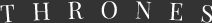
<style>
.page{position:relative;width:212px;height:23px;background:#333333}
.page>*{position:absolute;margin:0}
.t1{font:24px "PlayfairDisplay-Regular";letter-spacing:0.7em;color:#ffffff;text-transform:uppercase}
</style>
<div class="page">
<p class="t1" style="left:0px;top:1px;width:213px;height:22px">thrones</p>
</div>
